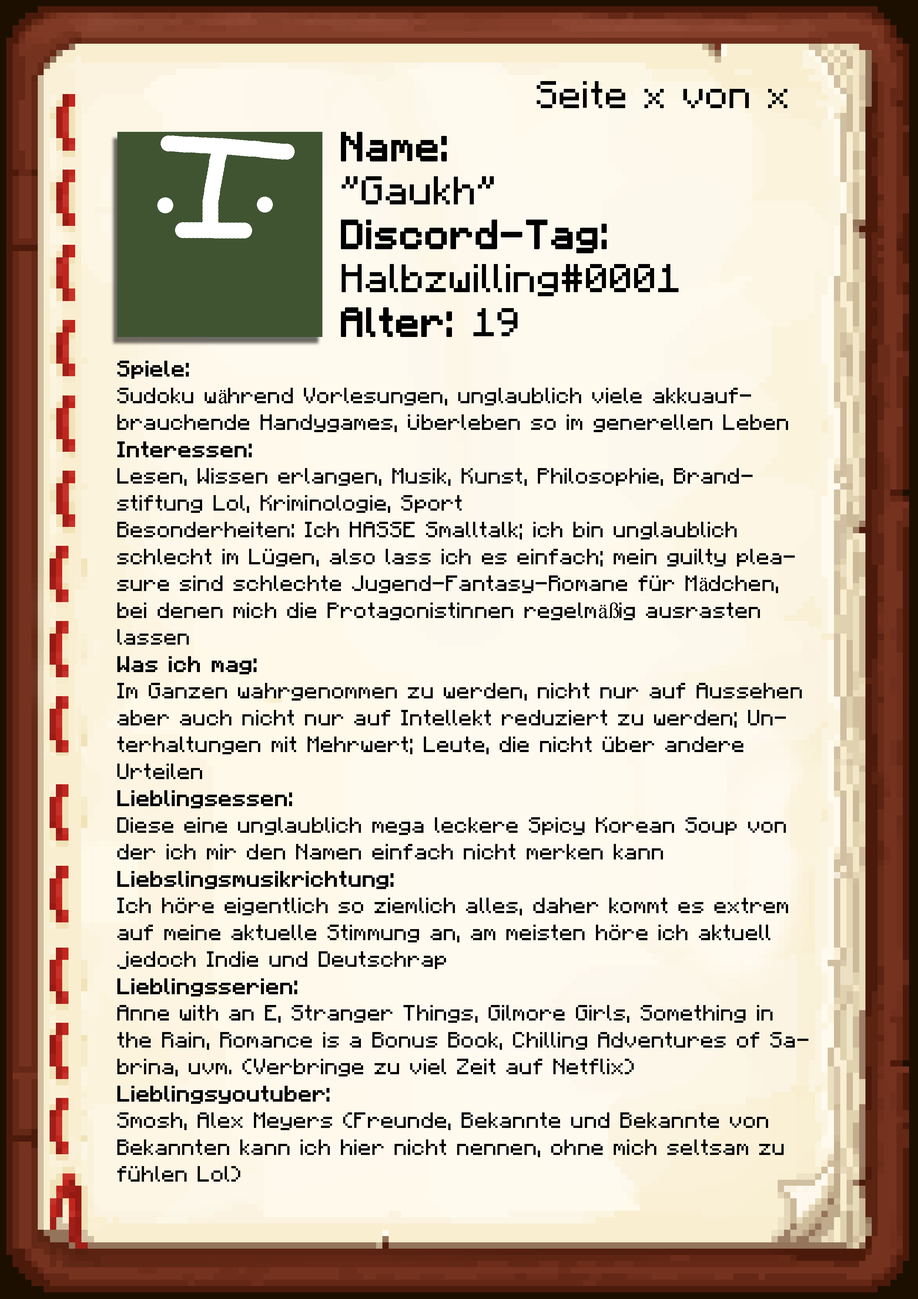
<style>
.page{position:relative;width:918px;height:1299px}
.page>*{position:absolute;margin:0}
.t1{font:38.6px "Minecraft-Regular";color:#000000}
.t2{font:40.1px/43.9px "Minecraft-Regular";color:#000000}
.t3{font:40.1px/43.9px "Minecraft-Regular";color:#000000;font-weight:bold}
.t4{font:22.4px "Minecraft-Regular";color:#000000}
.t5{font:22.4px "Minecraft-Regular";color:#000000;font-weight:bold}
.t6{font:22.4px "TimesNewRomanPSMT";color:#000000}
</style>
<div class="page">
<p class="t1" style="left:537px;top:81px;width:250px;height:27px">Seite x von x</p>
<p class="t2" style="left:341px;top:132px;width:338px;height:205px"><span class="t3">Name:<br></span>"Gaukh"<br><span class="t3">Discord-Tag:<br></span>Halbzwilling#0001<br><span class="t3">Alter: </span>19</p>
<p class="t4" style="left:117px;top:361px;width:692px;height:820px"><span class="t5">Spiele: <br></span>Sudoku w<span class="t6">ä</span>hrend Vorlesungen, unglaublich viele akkuaufbrauchende Handygames, Überleben so im generellen Leben<br><span class="t5">Interessen:<br></span>Lesen, Wissen erlangen, Musik, Kunst, Philosophie, Brandstiftung Lol, Kriminologie, Sport<br>Besonderheiten: Ich HASSE Smalltalk; ich bin unglaublich schlecht im Lügen, also lass ich es einfach; mein guilty pleasure sind schlechte Jugend-Fantasy-Romane für M<span class="t6">ä</span>dchen, bei denen mich die Protagonistinnen regelm<span class="t6">äß</span>ig ausrasten lassen<br><span class="t5">Was ich mag:<br></span>Im Ganzen wahrgenommen zu werden, nicht nur auf Aussehen aber auch nicht nur auf Intellekt reduziert zu werden; Unterhaltungen mit Mehrwert; Leute, die nicht über andere Urteilen<br><span class="t5">Lieblingsessen:<br></span>Diese eine unglaublich mega leckere Spicy Korean Soup von der ich mir den Namen einfach nicht merken kann<br><span class="t5">Liebslingsmusikrichtung:<br></span>Ich höre eigentlich so ziemlich alles, daher kommt es extrem auf meine aktuelle Stimmung an, am meisten höre ich aktuell jedoch Indie und Deutschrap<br><span class="t5">Lieblingsserien:<br></span>Anne with an E, Stranger Things, Gilmore Girls, Something in the Rain, Romance is a Bonus Book, Chilling Adventures of Sabrina, uvm. (Verbringe zu viel Zeit auf Netflix)<br><span class="t5">Lieblingsyoutuber:<br></span>Smosh, Alex Meyers (Freunde, Bekannte und Bekannte von Bekannten kann ich hier nicht nennen, ohne mich seltsam zu fühlen Lol)</p>
</div>
